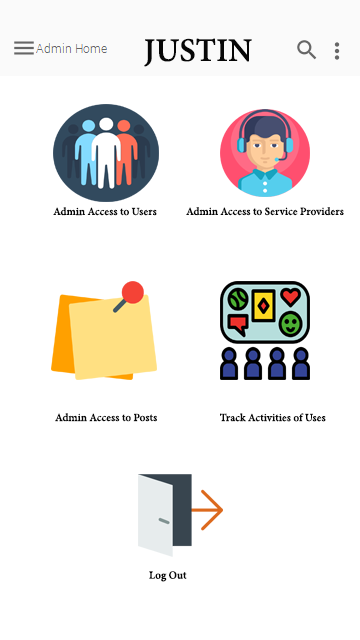
<style>
.page{position:relative;width:360px;height:640px;background:#ffffff}
.page>*{position:absolute;margin:0}
.t1{font:36px "AdobeDevanagari-Bold";color:#070707}
.t2{font:12px "AdobeDevanagari-Bold";color:#070707}
</style>
<div class="page">
<p class="t1" style="left:144px;top:38px;width:108px;height:29px">JUSTIN</p>
<p class="t2" style="left:53px;top:207px;width:104px;height:9px">Admin Access to Users</p>
<p class="t2" style="left:186px;top:207px;width:158px;height:9px">Admin Access to Service Providers</p>
<p class="t2" style="left:55px;top:413px;width:102px;height:9px">Admin Access to Posts</p>
<p class="t2" style="left:220px;top:413px;width:106px;height:9px">Track Activities of Uses</p>
<p class="t2" style="left:149px;top:571px;width:38px;height:11px">Log Out</p>
</div>
